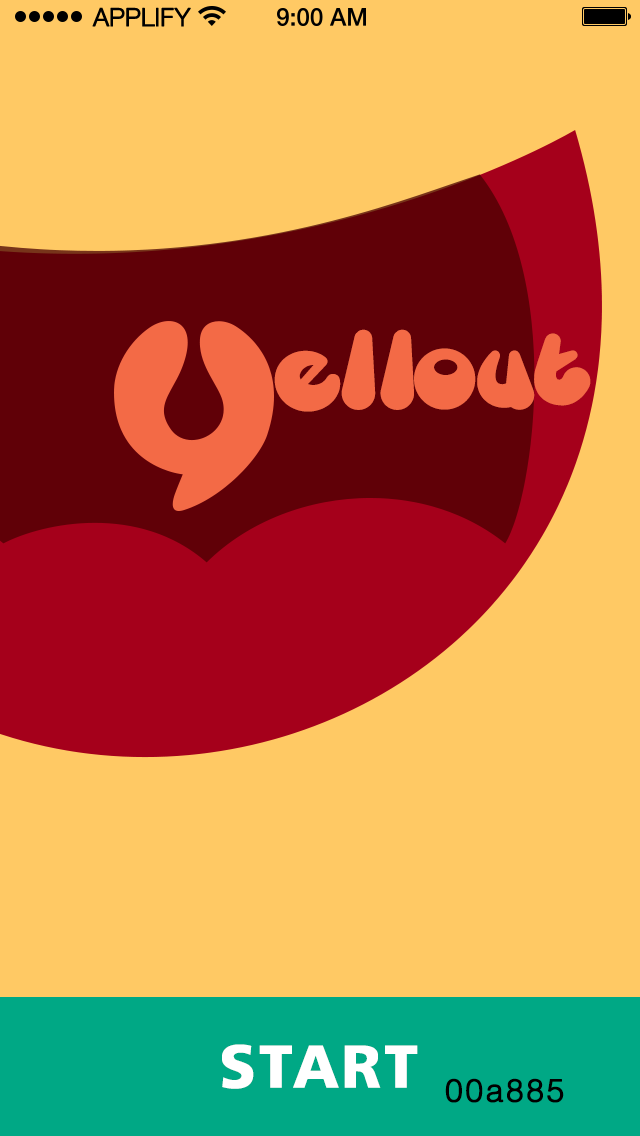
<style>
.page{position:relative;width:640px;height:1136px;background:#ffc964}
.page>*{position:absolute;margin:0}
.t1{font:25px "HelveticaNeueLTCom-Lt";letter-spacing:-0.02em;color:#000000;font-weight:bold}
.t2{font:131.6px "Gretoon";letter-spacing:-0.04em;color:#f36a46}
.t3{font:104.2px "Humanist777BT-BlackB";letter-spacing:0.06em;color:#ffffff}
.t4{font:54.2px "HelveticaLTStd-Light";letter-spacing:0.06em;color:#000000;font-weight:bold}
</style>
<div class="page">
<p class="t1" style="left:92px;top:7px;width:99px;height:20px">APPLIFY</p>
<p class="t2" style="left:274px;top:329px;width:317px;height:83px">ellout</p>
<p class="t3" style="left:222px;top:1044px;width:196px;height:45px">START</p>
<p class="t4" style="left:445px;top:1078px;width:119px;height:25px">00a885</p>
</div>
